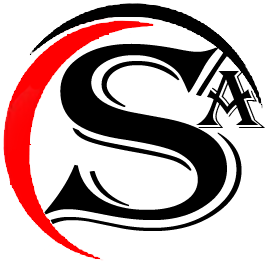
<style>
.page{position:relative;width:268px;height:268px;background:#ffffff}
.page>*{position:absolute;margin:0}
.t1{font:271.7px "Algerian";color:#000000;scale:1.31 1}
.t2{font:86.3px "Algerian";color:#000000;scale:1.06 1}
</style>
<div class="page">
<p class="t1" style="left:44px;top:43px;width:198px;height:188px">S</p>
<p class="t2" style="left:196px;top:71px;width:69px;height:57px">A</p>
</div>
